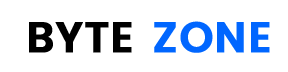
<style>
.page{position:relative;width:288px;height:72px;background:#ffffff}
.page>*{position:absolute;margin:0}
.t1{font:42.9px "Poppins-SemiBold";color:#000000;text-transform:uppercase;font-weight:bold}
.t2{font:42.9px "Poppins-SemiBold";color:#0066ff;text-transform:uppercase;font-weight:bold}
</style>
<div class="page">
<p class="t1" style="left:29px;top:22px;width:103px;height:31px">byte</p>
<p class="t2" style="left:154px;top:21px;width:116px;height:32px">zone</p>
</div>
